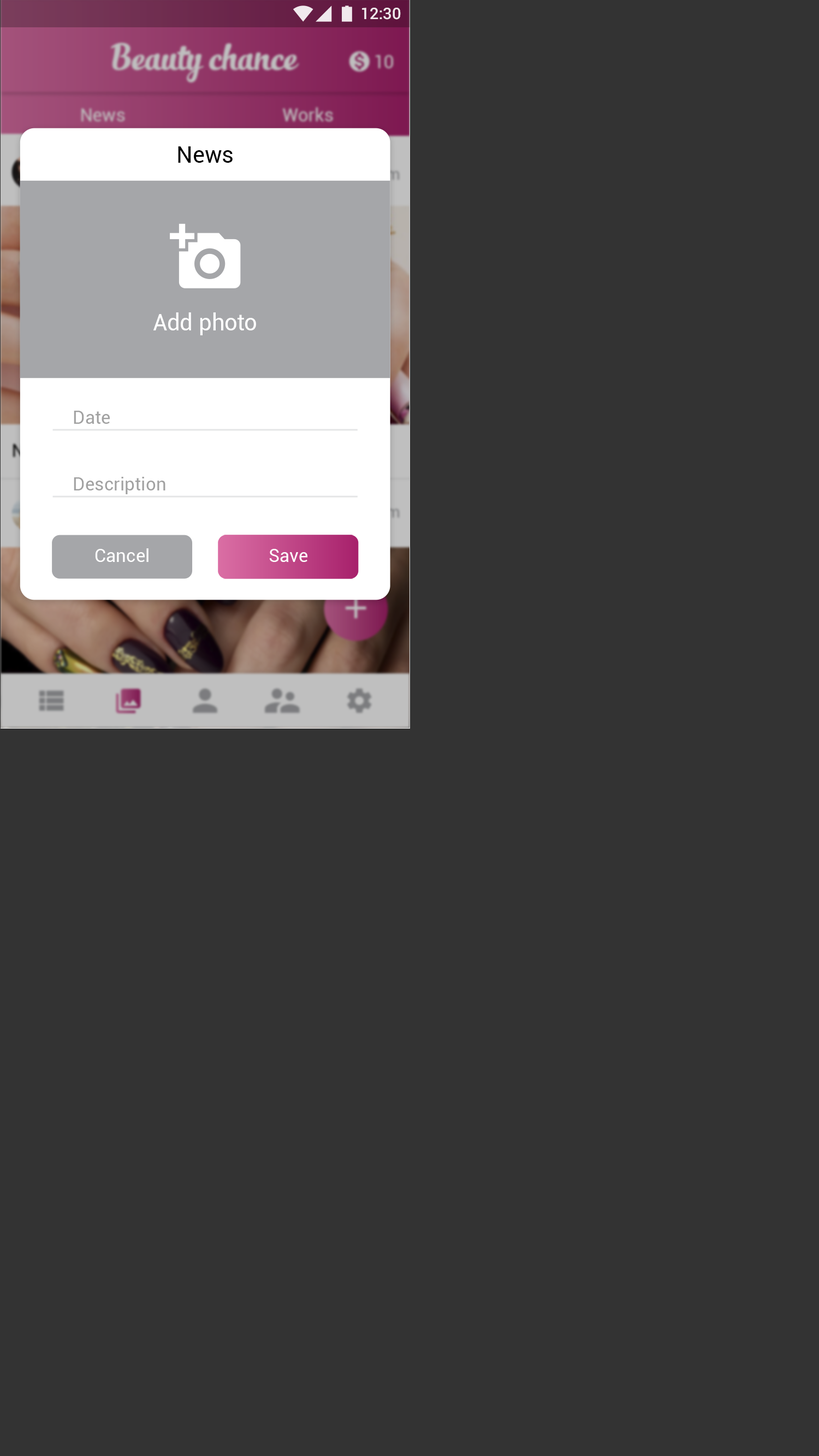
<style>
.page{position:relative;width:819px;height:1456px;background:#333333}
.page>*{position:absolute;margin:0}
.t1{font:15.9px "Roboto-Medium";color:#ffffff}
.t2{font:22.7px "Roboto-Regular";color:#000000}
.t3{font:22.7px "Roboto-Regular";letter-spacing:0.01em;color:#ffffff}
.t4{font:18.2px "Roboto-Regular";color:#a1a1a1}
.t5{font:18.2px "Roboto-Regular";color:#ffffff}
</style>
<div class="page">
<p class="t1" style="left:362px;top:8px;width:39px;height:12px">12:30</p>
<p class="t2" style="left:178px;top:146px;width:55px;height:17px">News</p>
<p class="t3" style="left:153px;top:312px;width:103px;height:23px">Add photo</p>
<p class="t4" style="left:74px;top:411px;width:36px;height:13px">Date</p>
<p class="t4" style="left:74px;top:477px;width:91px;height:17px">Description</p>
<p class="t5" style="left:95px;top:548px;width:54px;height:14px">Cancel</p>
<p class="t5" style="left:269px;top:549px;width:38px;height:13px">Save</p>
</div>
